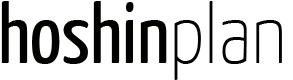
<style>
.page{position:relative;width:293px;height:80px;background:#ffffff}
.page>*{position:absolute;margin:0}
.t1{font:85.1px "YanoneKaffeesatz-Regular";color:#010100}
.t2{font:85.1px "YanoneKaffeesatz-Thin";color:#010100}
</style>
<div class="page">
<p class="t1" style="left:1px;top:1px;width:281px;height:79px">hoshin<span class="t2">plan</span></p>
</div>
